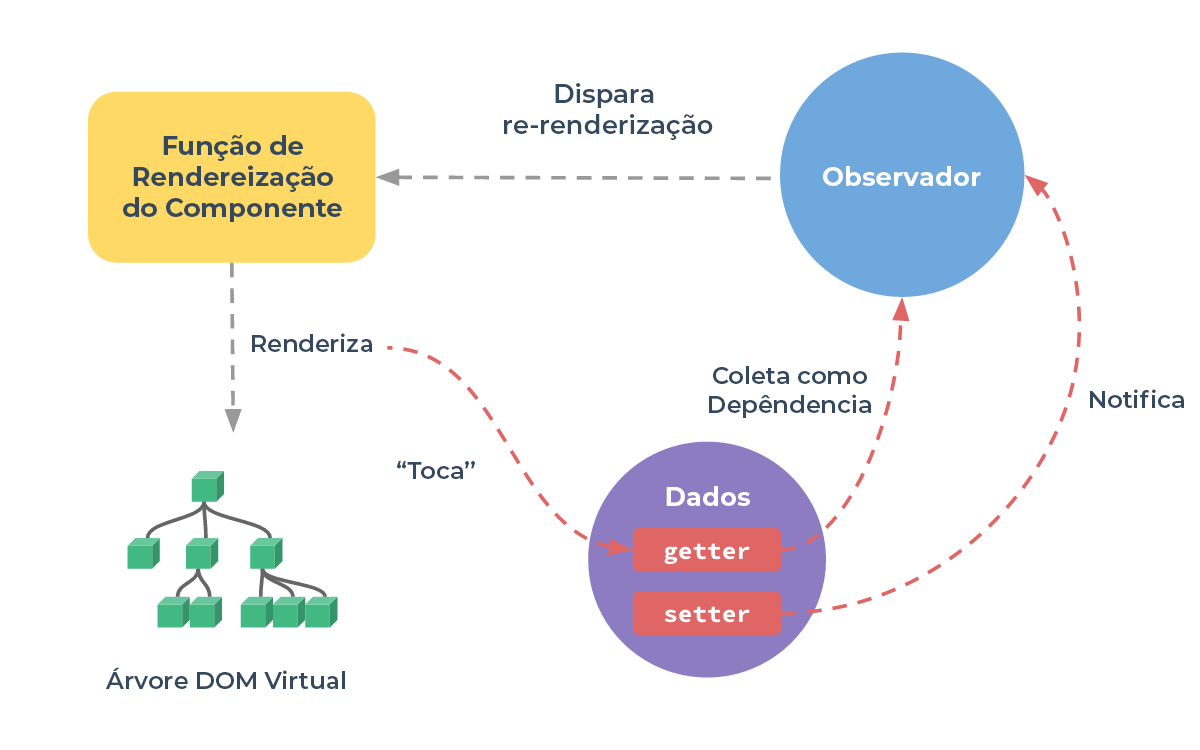
<style>
.page{position:relative;width:1200px;height:750px;background:#ffffff}
.page>*{position:absolute;margin:0}
.t1{font:26px "Montserrat-SemiBold";color:#34495e}
.t2{font:26px "Montserrat-Bold";color:#34495e}
.t3{font:26px "Montserrat-Bold";color:#ffffff}
.t4{font:24px "Montserrat-SemiBold";color:#34495e}
</style>
<div class="page">
<p class="t1" style="left:504px;top:83px;width:209px;height:57px;text-align:center">Dispara <br>re-renderização</p>
<p class="t2" style="left:123px;top:135px;width:219px;height:87px;text-align:center">Função de<br>Rendereização<br>do Componente</p>
<p class="t3" style="left:823px;top:166px;width:158px;height:20px">Observador</p>
<p class="t4" style="left:252px;top:333px;width:120px;height:19px">Renderiza</p>
<p class="t4" style="left:709px;top:366px;width:162px;height:52px;text-align:center">Coleta como<br>Depêndencia</p>
<p class="t4" style="left:1090px;top:389px;width:94px;height:19px">Notifica</p>
<p class="t4" style="left:397px;top:461px;width:78px;height:18px">“Toca”</p>
<p class="t3" style="left:666px;top:486px;width:84px;height:20px">Dados</p>
<p class="t4" style="left:105px;top:667px;width:240px;height:22px">Árvore DOM Virtual</p>
</div>
